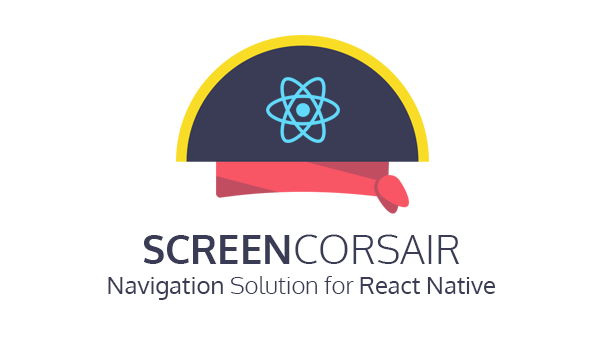
<style>
.page{position:relative;width:600px;height:350px;background:#ffffff}
.page>*{position:absolute;margin:0}
.t1{font:40px "Oxygen-Light";color:#393c54}
.t2{font:40px "Oxygen-Bold";color:#393c54}
.t3{font:24px "Oxygen-Light";color:#393c54}
.t4{font:24px "Oxygen-Regular";color:#393c54}
</style>
<div class="page">
<p class="t1" style="left:143px;top:234px;width:317px;height:30px"><span class="t2">SCREEN</span>CORSAIR</p>
<p class="t3" style="left:108px;top:276px;width:388px;height:24px"><span class="t4">Navigation</span> Solution for <span class="t4">React Native</span></p>
</div>
